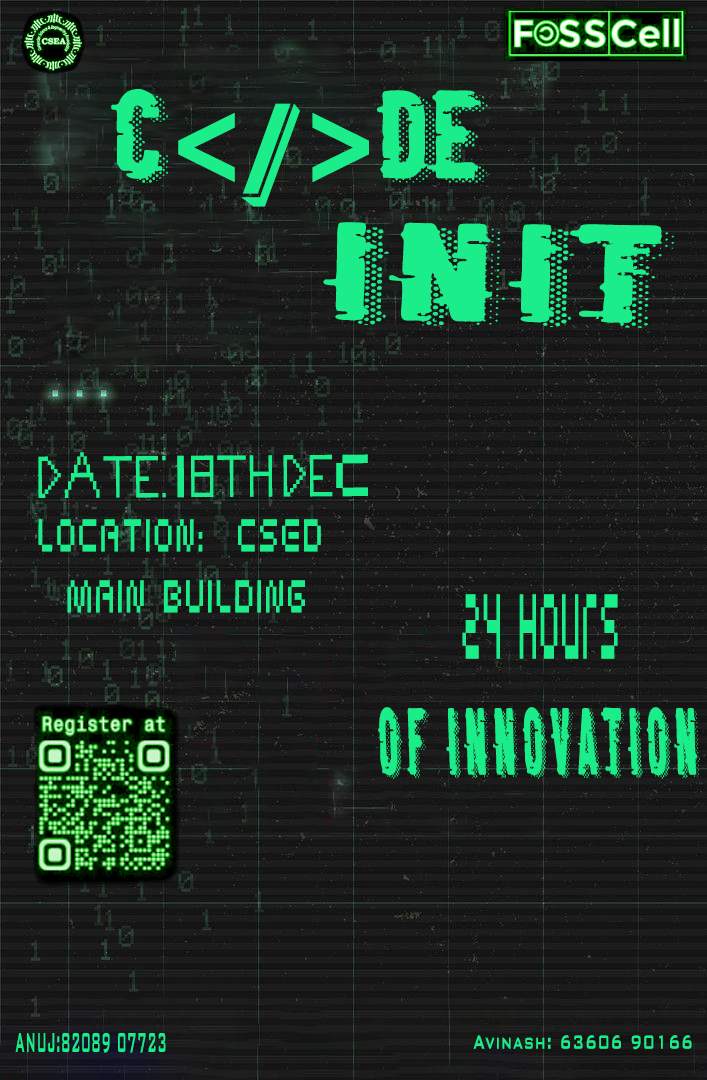
<style>
.page{position:relative;width:707px;height:1080px}
.page>*{position:absolute;margin:0}
.t1{font:117.1px "VinetaBT-Regular";color:#1bed8a;scale:0.83 1}
.t2{font:117.1px "RetroComputer";color:#1bed8a;scale:0.83 1}
.t3{font:130.4px "RetroComputer";letter-spacing:0.1em;color:#1bed8a;scale:1.38 1}
.t4{font:65.9px "ComputerMalfunctionError";letter-spacing:0.025em;color:#1bed8a;scale:0.76 1}
.t5{font:65.9px "SciFiedBitmap";letter-spacing:0.025em;color:#1bed8a;scale:0.76 1}
.t6{font:50.8px "SciFiedBitmap";letter-spacing:0.075em;color:#1bed8a;scale:0.52 1}
.t7{font:102.6px "SciFiedBitmap";letter-spacing:0.075em;color:#1bed8a;scale:0.25 1}
.t8{font:88.8px "RetroComputer";letter-spacing:0.2em;color:#1bed8a;scale:0.43 1}
.t9{font:36.4px "BankGothicBT-Medium";letter-spacing:0.075em;color:#1bed8a;scale:0.33 1}
.t10{font:25.5px "BankGothicBT-Medium";letter-spacing:0.075em;color:#1bed8a;scale:0.59 1}
</style>
<div class="page">
<p class="t1" style="left:111px;top:89px;width:379px;height:118px"><span class="t2">C</span>&lt;/&gt;<span class="t2">DE</span></p>
<p class="t3" style="left:323px;top:222px;width:351px;height:106px;rotate:1deg">INIT</p>
<p class="t4" style="left:38px;top:452px;width:330px;height:46px">DATE: <span class="t5">1</span>8TH DE<span class="t5">C</span></p>
<p class="t6" style="left:38px;top:519px;width:283px;height:94px;text-align:center">LOCATION:  CSED <br>MAIN BUILDING</p>
<p class="t7" style="left:462px;top:594px;width:156px;height:65px">24 Hours</p>
<p class="t8" style="left:378px;top:707px;width:322px;height:72px">OF INNOVATION</p>
<p class="t9" style="left:15px;top:1033px;width:151px;height:20px">ANUJ:82089 07723</p>
<p class="t10" style="left:473px;top:1035px;width:219px;height:15px">Avinash: 63606 90166</p>
</div>
